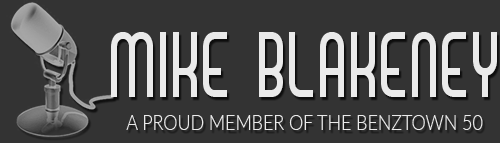
<style>
.page{position:relative;width:500px;height:143px;background:#333333}
.page>*{position:absolute;margin:0}
.t1{font:71.5px "MadameButterfly";letter-spacing:0.015em;color:#eaeaea;text-transform:uppercase;scale:0.83 1}
.t2{font:21.4px "Lato-Light";color:#eaeaea;text-transform:uppercase;scale:0.83 1}
</style>
<div class="page">
<p class="t1" style="left:111px;top:32px;width:386px;height:65px">MIKE BLAKENEY</p>
<p class="t2" style="left:126px;top:115px;width:357px;height:15px">A PROUD MEMBER OF THE BENZTOWN 50</p>
</div>
